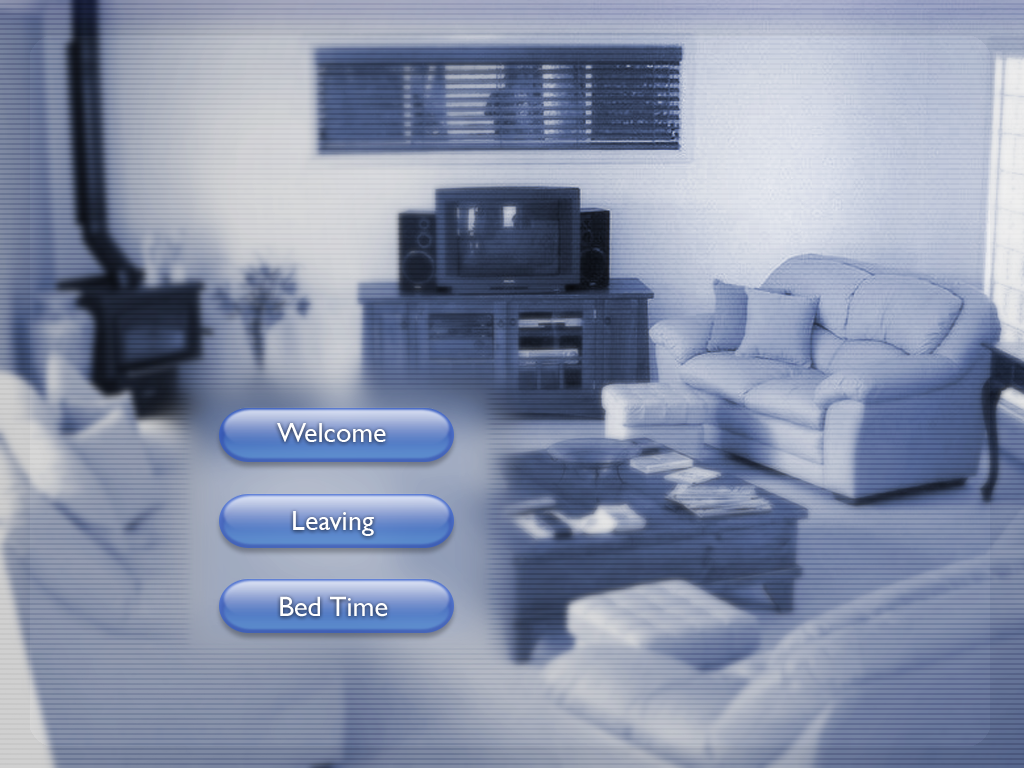
<style>
.page{position:relative;width:1024px;height:768px}
.page>*{position:absolute;margin:0}
.t1{font:28.1px "GillSansMT";color:#ffffff}
</style>
<div class="page">
<p class="t1" style="left:277px;top:423px;width:109px;height:19px">Welcome</p>
<p class="t1" style="left:293px;top:511px;width:81px;height:25px">Leaving</p>
<p class="t1" style="left:280px;top:596px;width:108px;height:21px">Bed Time</p>
</div>
